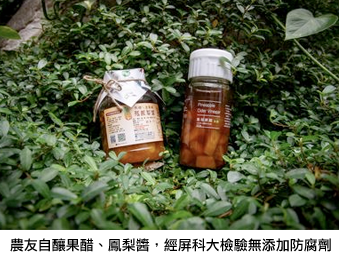
<style>
.page{position:relative;width:339px;height:267px}
.page>*{position:absolute;margin:0}
.t1{font:14px "LiHeiPro";color:#000000}
</style>
<div class="page">
<p class="t1" style="left:10px;top:238px;width:321px;height:14px">農友自釀果醋、鳳梨醬，經屏科大檢驗無添加防腐劑</p>
</div>
